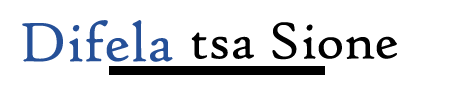
<style>
.page{position:relative;width:454px;height:100px;background:#ffffff}
.page>*{position:absolute;margin:0}
.t1{font:59px "HighTowerText-Reg";color:#255098}
.t2{font:55px "HighTowerText-Reg";color:#000000}
</style>
<div class="page">
<p class="t1" style="left:22px;top:20px;width:151px;height:42px">Difela</p>
<p class="t2" style="left:191px;top:22px;width:206px;height:38px">tsa Sione</p>
</div>
